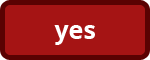
<style>
.page{position:relative;width:150px;height:60px;background:#a51414}
.page>*{position:absolute;margin:0}
.t1{font:25px "OpenSans-Bold";color:#ffffff}
</style>
<div class="page">
<p class="t1" style="left:54px;top:25px;width:41px;height:20px">yes</p>
</div>
